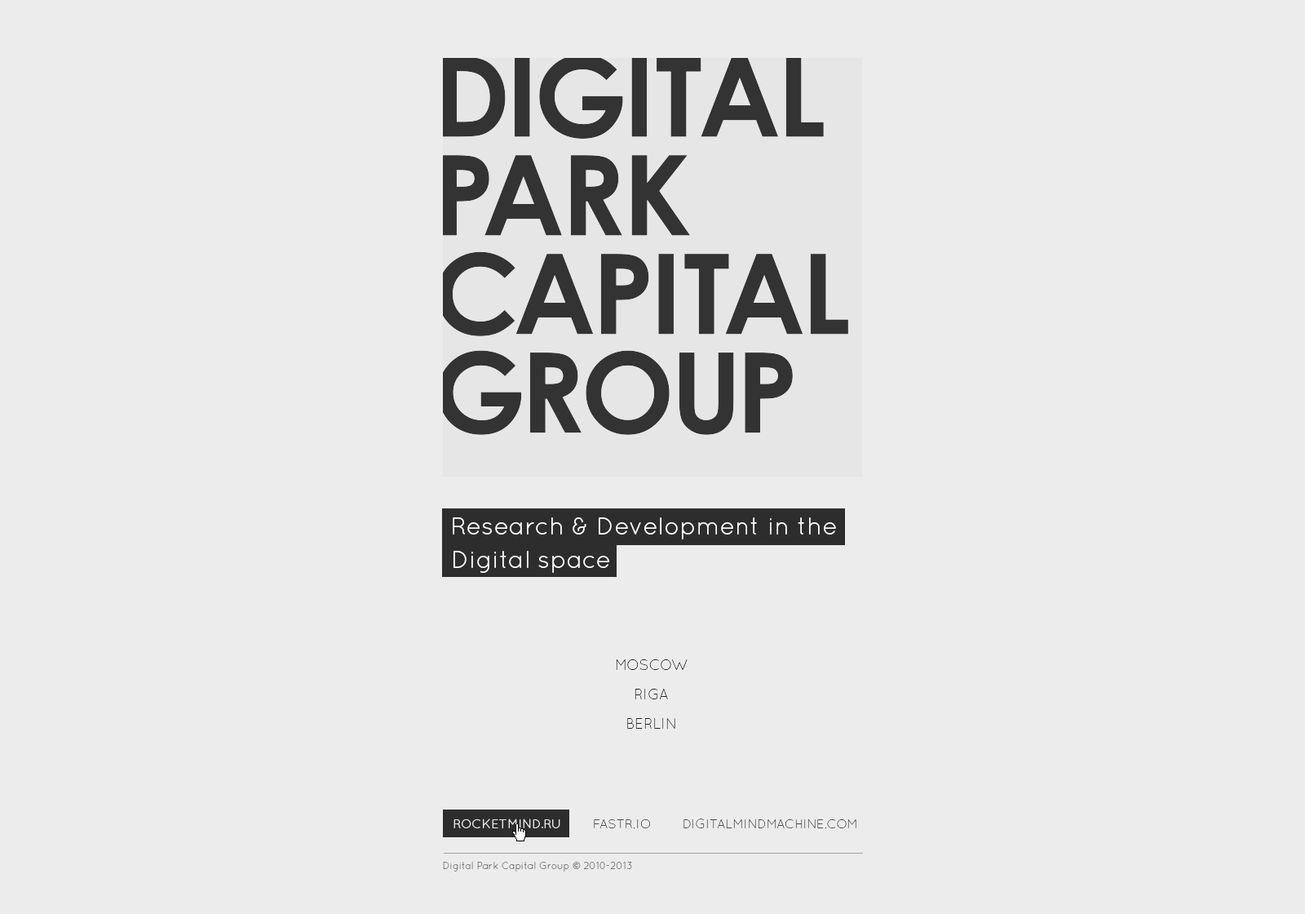
<style>
.page{position:relative;width:1305px;height:914px;background:#ececec}
.page>*{position:absolute;margin:0}
.t1{font:24.9px/33.4px "QuicksandBook-Regular";color:#ffffff}
.t2{font:14.7px/29.4px "QuicksandLight-Regular";color:#1c1d1d}
.t3{font:9.8px "QuicksandLight-Regular";color:#4b4b4b}
</style>
<div class="page">
<p class="t1" style="left:453px;top:517px;width:383px;height:56px">Research &amp; Development in the <br>Digital space</p>
<p class="t2" style="left:616px;top:659px;width:72px;height:69px;text-align:center">MOSCOW<br>RIGA<br>BERLIN</p>
<p class="t3" style="left:443px;top:861px;width:189px;height:10px">Digital Park Capital Group © 2010-2013</p>
</div>
